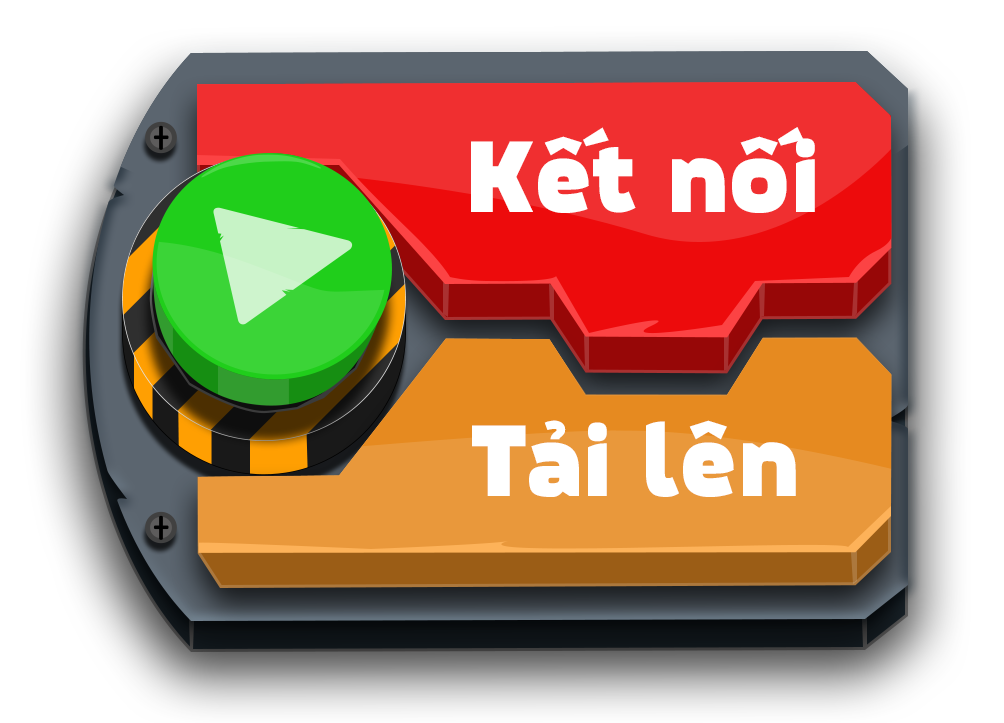
<style>
.page{position:relative;width:1004px;height:723px}
.page>*{position:absolute;margin:0}
.t1{font:99.4px "MovaviGrotesqueBlack";color:#ffffff}
</style>
<div class="page">
<p class="t1" style="left:471px;top:127px;width:344px;height:86px">Kết nối</p>
<p class="t1" style="left:472px;top:420px;width:324px;height:77px">Tải lên</p>
</div>
